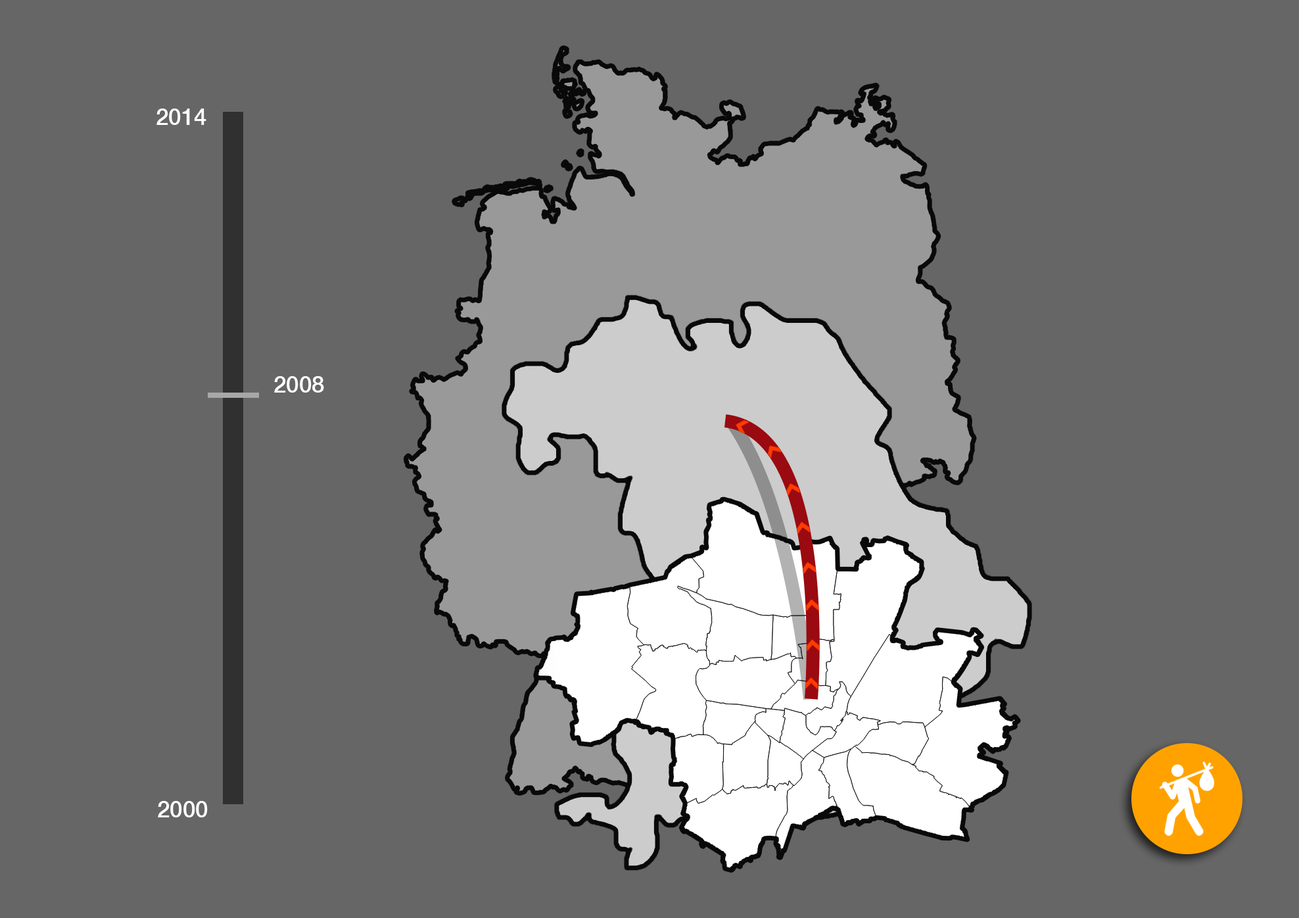
<style>
.page{position:relative;width:1299px;height:918px;background:#666666}
.page>*{position:absolute;margin:0}
.t1{font:23px "HelveticaNeue-Medium";color:#ffffff;text-transform:uppercase}
</style>
<div class="page">
<p class="t1" style="left:156px;top:108px;width:50px;height:17px">2014</p>
<p class="t1" style="left:274px;top:376px;width:50px;height:17px">2008</p>
<p class="t1" style="left:158px;top:801px;width:50px;height:16px">2000</p>
</div>
